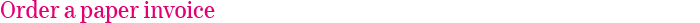
<style>
.page{position:relative;width:700px;height:23px;background:#ffffff}
.page>*{position:absolute;margin:0}
.t1{font:26px "Tele-Antiqua";color:#e20074}
</style>
<div class="page">
<p class="t1" style="left:1px;top:0px;width:214px;height:23px">Order a paper invoice</p>
</div>
